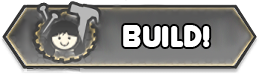
<style>
.page{position:relative;width:259px;height:75px}
.page>*{position:absolute;margin:0}
.t1{font:36px "Junegull";color:#ffffff}
</style>
<div class="page">
<p class="t1" style="left:123px;top:25px;width:87px;height:22px">BUILD!</p>
</div>
